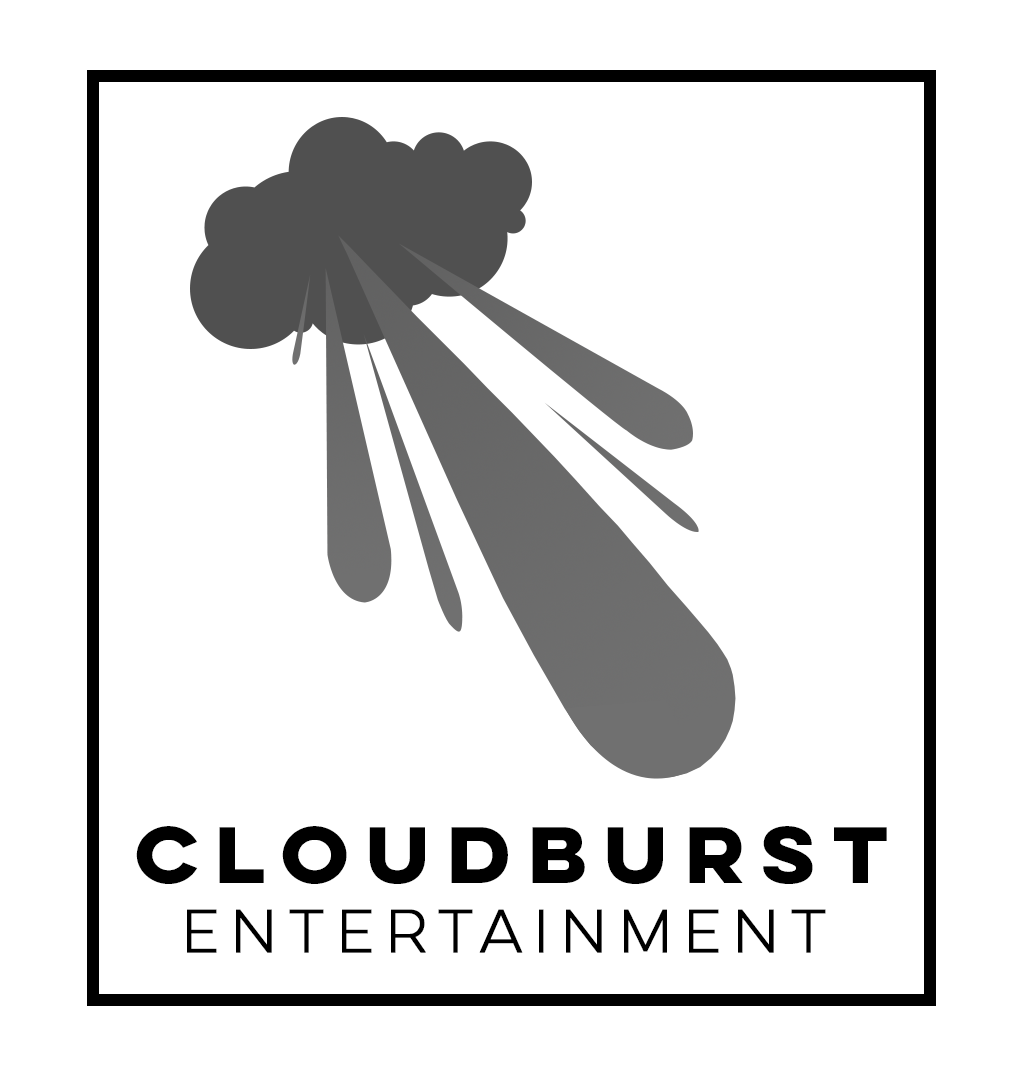
<style>
.page{position:relative;width:1027px;height:1080px;background:#ffffff}
.page>*{position:absolute;margin:0}
.t1{font:71.6px "LuloCleanOne-Bold";color:#000000;scale:1.08 1}
.t2{font:54.4px "LuloCleanOne";color:#000000;font-weight:bold;scale:0.97 1}
</style>
<div class="page">
<p class="t1" style="left:136px;top:826px;width:751px;height:58px">CLOUDBURST</p>
<p class="t2" style="left:187px;top:909px;width:639px;height:44px">ENTERTAINMENT</p>
</div>
